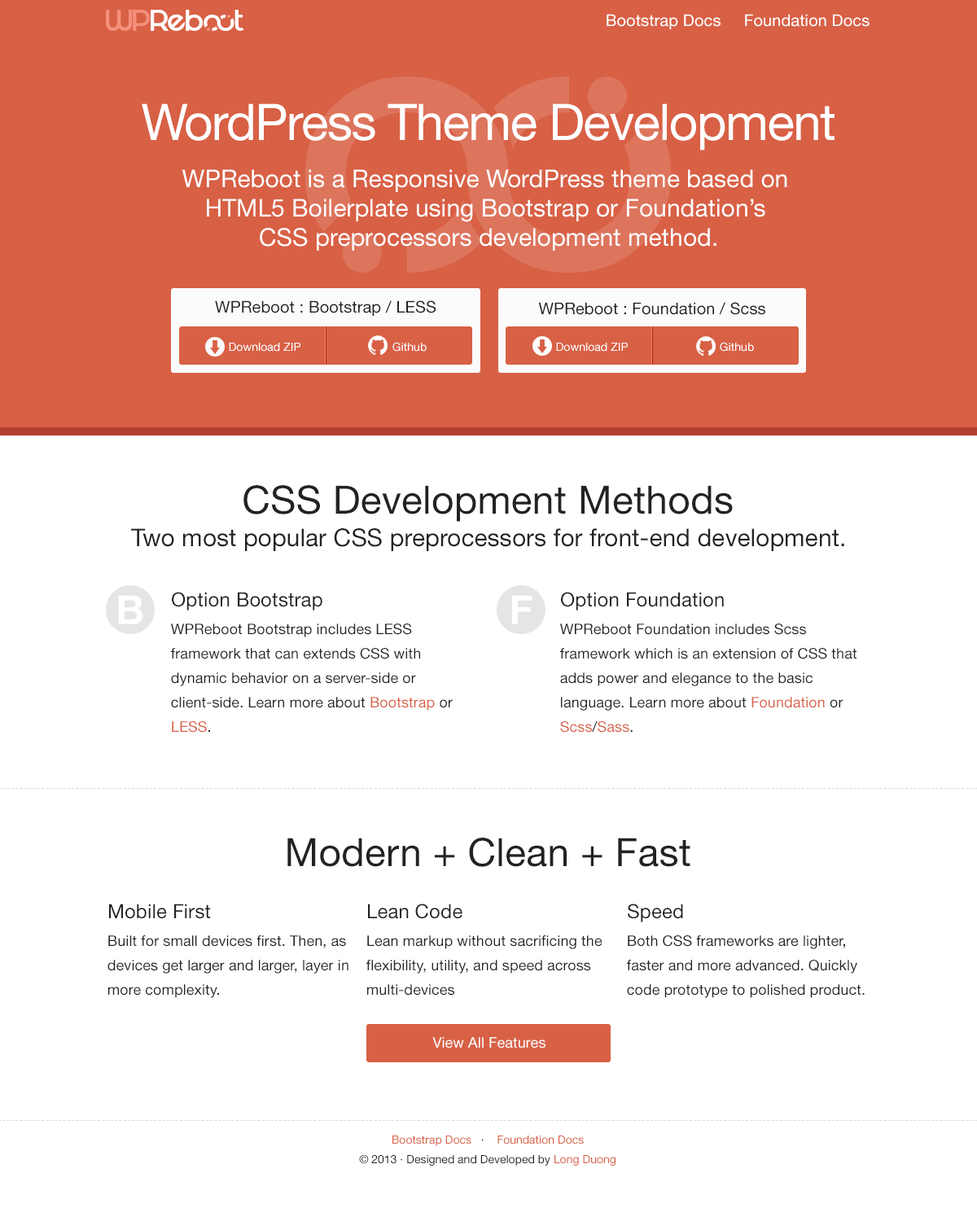
<style>
.page{position:relative;width:977px;height:1221px;background:#ffffff}
.page>*{position:absolute;margin:0}
.t1{font:16.3px "HelveticaNeue-Roman";letter-spacing:0.005em;color:#ffffff}
.t2{font:50.5px "HelveticaNeue-Roman";letter-spacing:-0.025em;color:#ffffff}
.t3{font:24.4px/29.3px "HelveticaNeue-Roman";color:#ffffff}
.t4{font:16.3px "HelveticaNeue-Roman";letter-spacing:0.005em;color:#222222}
.t5{font:11.4px "HelveticaNeue-Roman";letter-spacing:0.005em;color:#ffffff}
.t6{font:39.1px "HelveticaNeue-Roman";letter-spacing:0.005em;color:#222222}
.t7{font:24.4px "HelveticaNeue-Roman";color:#222222}
.t8{font:19.5px "HelveticaNeue-Roman";letter-spacing:0.005em;color:#222222}
.t9{font:39.1px "HelveticaNeue-Medium";letter-spacing:0.005em;color:#ffffff;font-weight:bold}
.t10{font:14.7px/24.4px "HelveticaNeue-Roman";letter-spacing:0.005em;color:#222222}
.t11{font:14.7px/24.4px "HelveticaNeue-Roman";letter-spacing:0.005em;color:#d86045}
.t12{font:19.6px "HelveticaNeue-Roman";letter-spacing:0.005em;color:#222222}
.t13{font:14.7px "HelveticaNeue-Roman";letter-spacing:0.005em;color:#ffffff}
.t14{font:11.4px/19.5px "HelveticaNeue-Roman";color:#222222}
.t15{font:11.4px/19.5px "HelveticaNeue-Roman";color:#d86045}
</style>
<div class="page">
<p class="t1" style="left:606px;top:14px;width:263px;height:15px">Bootstrap Docs     Foundation Docs</p>
<p class="t2" style="left:142px;top:103px;width:692px;height:48px">WordPress Theme Development</p>
<p class="t3" style="left:182px;top:169px;width:605px;height:82px;text-align:center">WPReboot is a Responsive WordPress theme based on <br>HTML5 Boilerplate using Bootstrap or Foundation’s <br>CSS preprocessors development method.</p>
<p class="t4" style="left:215px;top:300px;width:221px;height:16px">WPReboot : Bootstrap / LESS</p>
<p class="t4" style="left:538px;top:302px;width:227px;height:13px">WPReboot : Foundation / Scss</p>
<p class="t5" style="left:392px;top:342px;width:34px;height:10px">Github</p>
<p class="t5" style="left:720px;top:342px;width:34px;height:10px">Github</p>
<p class="t5" style="left:229px;top:343px;width:71px;height:9px">Download ZIP</p>
<p class="t5" style="left:556px;top:343px;width:72px;height:9px">Download ZIP</p>
<p class="t6" style="left:243px;top:485px;width:490px;height:37px">CSS Development Methods</p>
<p class="t7" style="left:131px;top:528px;width:713px;height:23px">Two most popular CSS preprocessors for front-end development.</p>
<p class="t8" style="left:172px;top:592px;width:150px;height:18px">Option Bootstrap</p>
<p class="t8" style="left:561px;top:592px;width:163px;height:18px">Option Foundation</p>
<p class="t9" style="left:118px;top:595px;width:25px;height:29px">B</p>
<p class="t9" style="left:511px;top:595px;width:21px;height:29px">F</p>
<p class="t10" style="left:171px;top:623px;width:282px;height:110px">WPReboot Bootstrap includes LESS <br>framework that can extends CSS with <br>dynamic behavior on a server-side or <br>client-side. Learn more about <span class="t11">Bootstrap </span>or <br><span class="t11">LESS</span>.</p>
<p class="t10" style="left:560px;top:623px;width:296px;height:110px">WPReboot Foundation includes Scss <br>framework which is an extension of CSS that <br>adds power and elegance to the basic <br>language. Learn more about <span class="t11">Foundation</span> or <br><span class="t11">Scss</span>/<span class="t11">Sass</span>.</p>
<p class="t6" style="left:287px;top:838px;width:403px;height:29px">Modern + Clean + Fast</p>
<p class="t12" style="left:109px;top:903px;width:102px;height:16px">Mobile First</p>
<p class="t12" style="left:368px;top:903px;width:94px;height:16px">Lean Code</p>
<p class="t12" style="left:628px;top:903px;width:55px;height:19px">Speed</p>
<p class="t10" style="left:107px;top:935px;width:241px;height:63px">Built for small devices first. Then, as <br>devices get larger and larger, layer in <br>more complexity.</p>
<p class="t10" style="left:366px;top:935px;width:236px;height:60px">Lean markup without sacrificing the <br>flexibility, utility, and speed across <br>multi-devices</p>
<p class="t10" style="left:627px;top:935px;width:237px;height:63px">Both CSS frameworks are lighter, <br>faster and more advanced. Quickly<br>code prototype to polished product.</p>
<p class="t13" style="left:432px;top:1037px;width:113px;height:11px">View All Features</p>
<p class="t14" style="left:359px;top:1135px;width:256px;height:31px;text-align:center"><span class="t15">Bootstrap Docs   </span>·    <span class="t15">Foundation Docs<br></span>© 2013 · Designed and Developed by <span class="t15">Long Duong</span></p>
</div>
